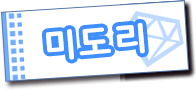
<style>
.page{position:relative;width:196px;height:90px;background:#ffffff}
.page>*{position:absolute;margin:0}
.t1{font:40px "DXMgoRB-KSCpc-EUC-H";color:#ffffff;font-weight:bold}
</style>
<div class="page">
<p class="t1" style="left:45px;top:23px;width:100px;height:37px;rotate:-5deg">미도리</p>
</div>
